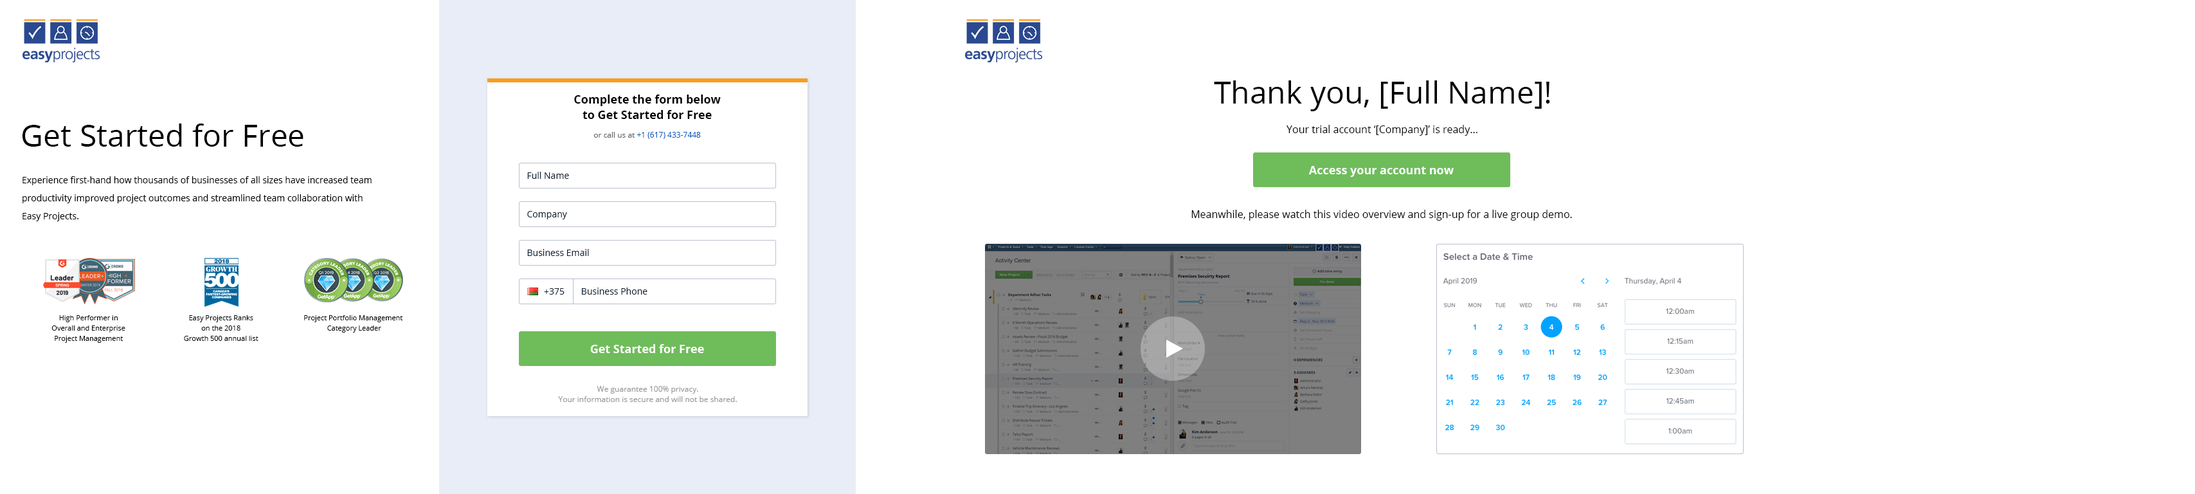
<style>
.page{position:relative;width:2195px;height:494px;background:#ffffff}
.page>*{position:absolute;margin:0}
.t1{font:30.9px "OpenSans-Regular";color:#000000}
.t2{font:11.6px/15.4px "OpenSans-Bold";color:#000000}
.t3{font:10.3px "OpenSans-Regular";color:#000000}
.t4{font:7.7px "OpenSans-Regular";color:#0a5ec1}
.t5{font:7.7px "OpenSans-Regular";color:#666666}
.t6{font:9px "OpenSans-Regular";color:#112233}
.t7{font:11.6px "OpenSans-Bold";color:#ffffff}
.t8{font:9px/18px "OpenSans-Regular";color:#000000}
.t9{font:7.1px/10.3px "OpenSans-Regular";color:#000000}
.t10{font:7.7px/10.3px "OpenSans-Regular";color:#999999}
</style>
<div class="page">
<p class="t1" style="left:1214px;top:80px;width:336px;height:31px">Thank you, [Full Name]!</p>
<p class="t2" style="left:574px;top:94px;width:147px;height:25px;text-align:center">Complete the form below<br>to Get Started for Free</p>
<p class="t1" style="left:22px;top:123px;width:281px;height:24px">Get Started for Free</p>
<p class="t3" style="left:1286px;top:125px;width:191px;height:11px">Your trial account ‘[Company]’ is ready...</p>
<p class="t4" style="left:593px;top:132px;width:108px;height:7px"><span class="t5">or call us at </span>+1 (617) 433-7448</p>
<p class="t6" style="left:527px;top:172px;width:42px;height:7px">Full Name</p>
<p class="t7" style="left:1308px;top:166px;width:146px;height:11px">Access your account now</p>
<p class="t8" style="left:22px;top:176px;width:350px;height:45px">Experience first-hand how thousands of businesses of all sizes have increased team<br>productivity improved project outcomes and streamlined team collaboration with<br>Easy Projects.</p>
<p class="t3" style="left:1191px;top:210px;width:381px;height:11px">Meanwhile, please watch this video overview and sign-up for a live group demo.</p>
<p class="t6" style="left:527px;top:211px;width:40px;height:8px">Company</p>
<p class="t6" style="left:527px;top:249px;width:62px;height:7px">Business Email</p>
<p class="t6" style="left:544px;top:288px;width:20px;height:6px">+375</p>
<p class="t6" style="left:582px;top:287px;width:65px;height:7px">Business Phone</p>
<p class="t9" style="left:51px;top:315px;width:74px;height:28px;text-align:center">High Performer in<br>Overall and Enterprise<br>Project Management</p>
<p class="t9" style="left:184px;top:315px;width:74px;height:26px;text-align:center">Easy Projects Ranks<br>on the 2018<br>Growth 500 annual list</p>
<p class="t9" style="left:304px;top:315px;width:98px;height:17px;text-align:center">Project Portfolio Management <br>Category Leader</p>
<p class="t7" style="left:590px;top:344px;width:114px;height:9px">Get Started for Free</p>
<p class="t10" style="left:558px;top:386px;width:179px;height:16px;text-align:center">We guarantee 100% privacy.<br>Your information is secure and will not be shared.</p>
</div>
